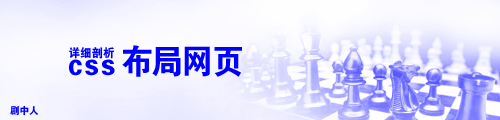
<style>
.page{position:relative;width:500px;height:120px}
.page>*{position:absolute;margin:0}
.t1{font:12px "FZDHTJW--GB1-0";color:#0000ff;scale:0.95 1}
.t2{font:33.6px "FZDHTJW--GB1-0";letter-spacing:-0.05em;color:#0000ff;scale:0.95 1}
.t3{font:30px "FZDHTJW--GB1-0";letter-spacing:0.075em;color:#0000ff;scale:0.95 1}
.t4{font:10px "FZDHTJW--GB1-0";color:#0000ff;scale:0.95 1}
</style>
<div class="page">
<p class="t1" style="left:69px;top:47px;width:46px;height:12px">详细剖析</p>
<p class="t2" style="left:122px;top:45px;width:120px;height:32px">布局网页</p>
<p class="t3" style="left:69px;top:59px;width:46px;height:17px">css</p>
<p class="t4" style="left:10px;top:105px;width:28px;height:11px">剧中人</p>
</div>
